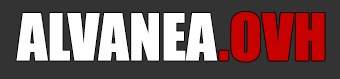
<style>
.page{position:relative;width:340px;height:79px;background:#333333}
.page>*{position:absolute;margin:0}
.t1{font:60px "Impact";color:#ffffff}
.t2{font:60px "Impact";color:#c70000}
</style>
<div class="page">
<p class="t1" style="left:16px;top:12px;width:309px;height:50px">ALVANEA<span class="t2">.OVH</span></p>
</div>
